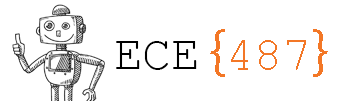
<style>
.page{position:relative;width:360px;height:101px;background:#ffffff}
.page>*{position:absolute;margin:0}
.t1{font:48px "CourierNewPSMT";color:#f37726}
.t2{font:60px "MyriadPro-Regular";color:#f37726}
.t3{font:48px "CourierNewPSMT";color:#000000}
</style>
<div class="page">
<p class="t1" style="left:210px;top:29px;width:118px;height:48px"><span class="t2">{</span>487<span class="t2">}</span></p>
<p class="t3" style="left:116px;top:41px;width:81px;height:29px">ECE</p>
</div>
